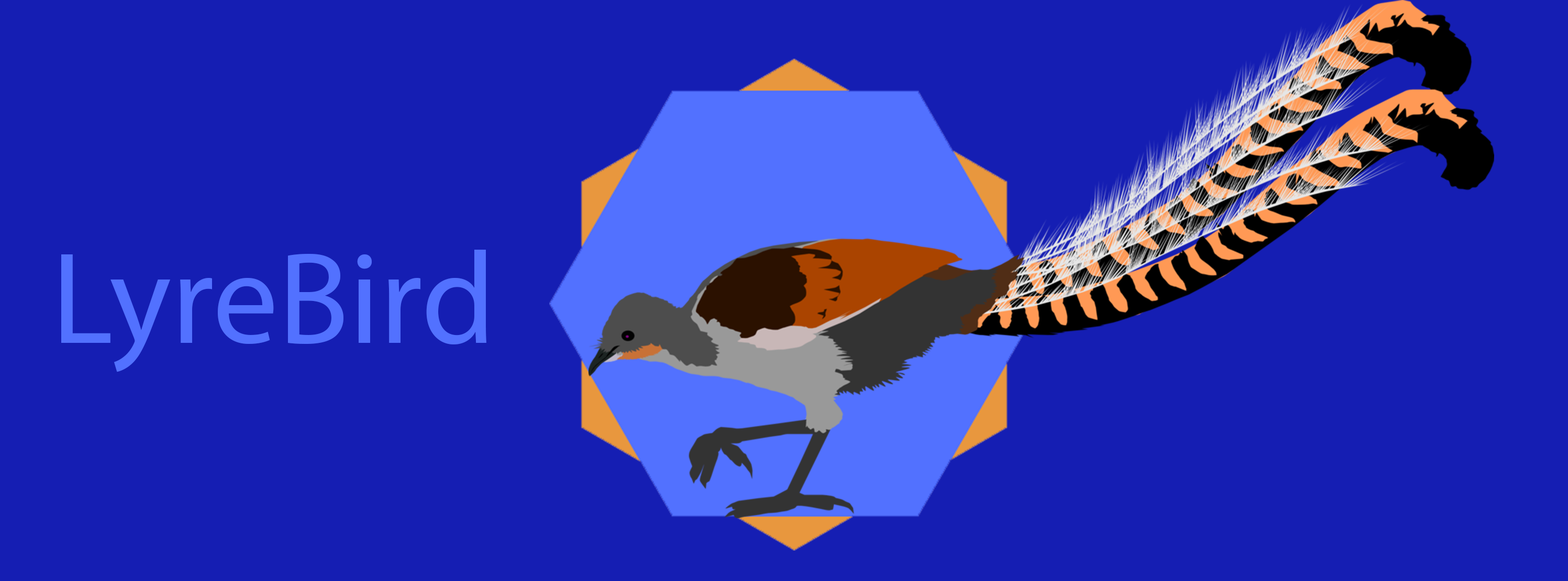
<style>
.page{position:relative;width:1568px;height:581px;background:#151eb3}
.page>*{position:absolute;margin:0}
.t1{font:130.9px "MyriadPro-Regular";color:#5271ff}
</style>
<div class="page">
<p class="t1" style="left:61px;top:250px;width:425px;height:122px">LyreBird</p>
</div>
